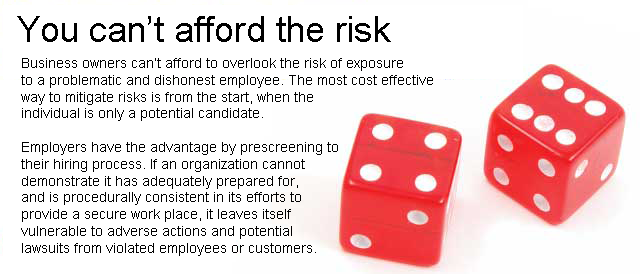
<style>
.page{position:relative;width:640px;height:274px;background:#ffffff}
.page>*{position:absolute;margin:0}
.t1{font:36px "ArialMT";color:#000000}
.t2{font:14px "ArialMT";color:#000000}
</style>
<div class="page">
<p class="t1" style="left:17px;top:16px;width:374px;height:26px">You can’t afford the risk</p>
<p class="t2" style="left:21px;top:58px;width:412px;height:198px">Business owners can’t afford to overlook the risk of exposure <br>to a problematic and dishonest employee. The most cost effective <br>way to mitigate risks is from the start, when the <br>individual is only a potential candidate. <br><br>Employers have the advantage by prescreening to <br>their hiring process. If an organization cannot <br>demonstrate it has adequately prepared for, <br>and is procedurally consistent in its efforts to <br>provide a secure work place, it leaves itself <br>vulnerable to adverse actions and potential <br>lawsuits from violated employees or customers.</p>
</div>
